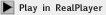
<style>
.page{position:relative;width:106px;height:15px;background:#eeeeee}
.page>*{position:absolute;margin:0}
.t1{font:9px "EuphemiaUCAS-Bold";color:#212121}
</style>
<div class="page">
<p class="t1" style="left:19px;top:4px;width:84px;height:9px">Play in RealPlayer</p>
</div>
